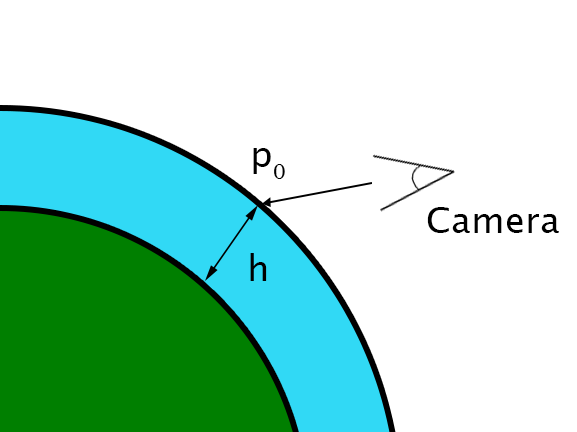
<style>
.page{position:relative;width:577px;height:432px;background:#ffffff}
.page>*{position:absolute;margin:0}
.t1{font:36.1px "LucidaSansUnicode";color:#000000}
.t2{font:36px "LucidaSansUnicode";color:#000000}
</style>
<div class="page">
<p class="t1" style="left:253px;top:148px;width:32px;height:31px">p0</p>
<p class="t2" style="left:427px;top:207px;width:132px;height:26px">Camera</p>
<p class="t2" style="left:250px;top:253px;width:17px;height:28px">h</p>
</div>
